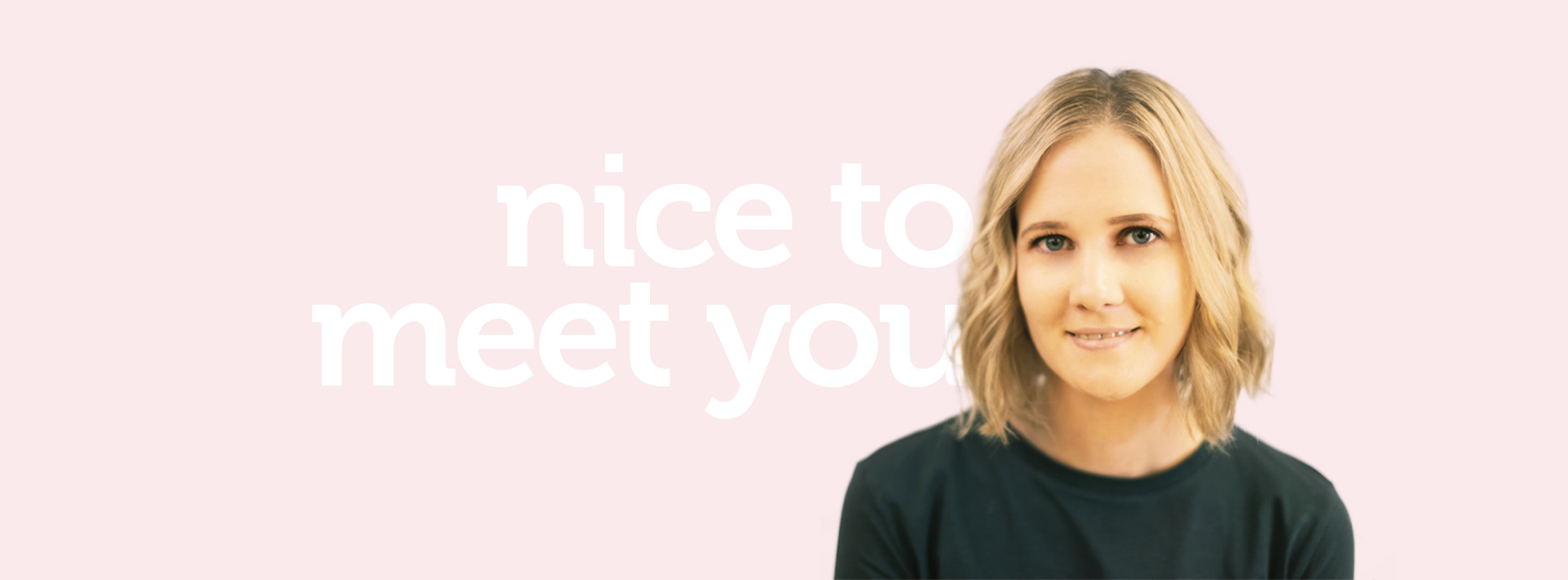
<style>
.page{position:relative;width:1568px;height:580px;background:#faeaeb}
.page>*{position:absolute;margin:0}
.t1{font:158.7px/110px "Museo-700";letter-spacing:-0.04em;color:#ffffff}
</style>
<div class="page">
<p class="t1" style="left:311px;top:154px;width:665px;height:265px;text-align:right">nice to<br>meet you</p>
</div>
